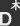
<style>
.page{position:relative;width:20px;height:26px;background:#333333}
.page>*{position:absolute;margin:0}
.t1{font:12px "DFKaiShu-SB-Estd-BF";color:#ececec;font-weight:bold}
.t2{font:18px "ArialMT";color:#ececec;font-weight:bold}
</style>
<div class="page">
<p class="t1" style="left:10px;top:0px;width:12px;height:11px">木</p>
<p class="t2" style="left:0px;top:12px;width:12px;height:14px">D</p>
</div>
